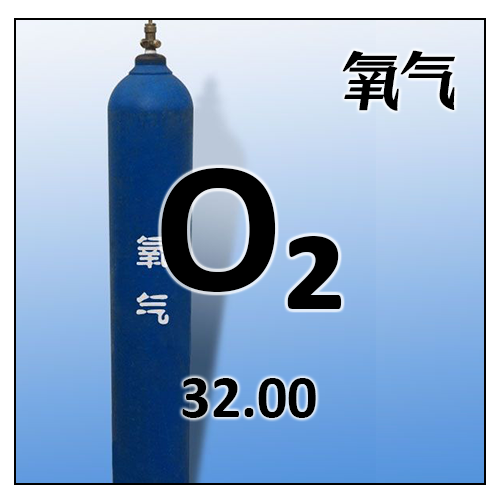
<style>
.page{position:relative;width:500px;height:500px}
.page>*{position:absolute;margin:0}
.t1{font:60px "ZoomlaShuaisongA028";color:#000000;font-weight:bold;scale:0.93 1}
.t2{font:190px "Calibri-Bold";color:#000000}
.t3{font:60px "Calibri-Bold";color:#000000}
</style>
<div class="page">
<p class="t1" style="left:342px;top:50px;width:113px;height:61px">氧气</p>
<p class="t2" style="left:161px;top:168px;width:181px;height:141px">O₂</p>
<p class="t3" style="left:182px;top:378px;width:134px;height:40px">32.00</p>
</div>
